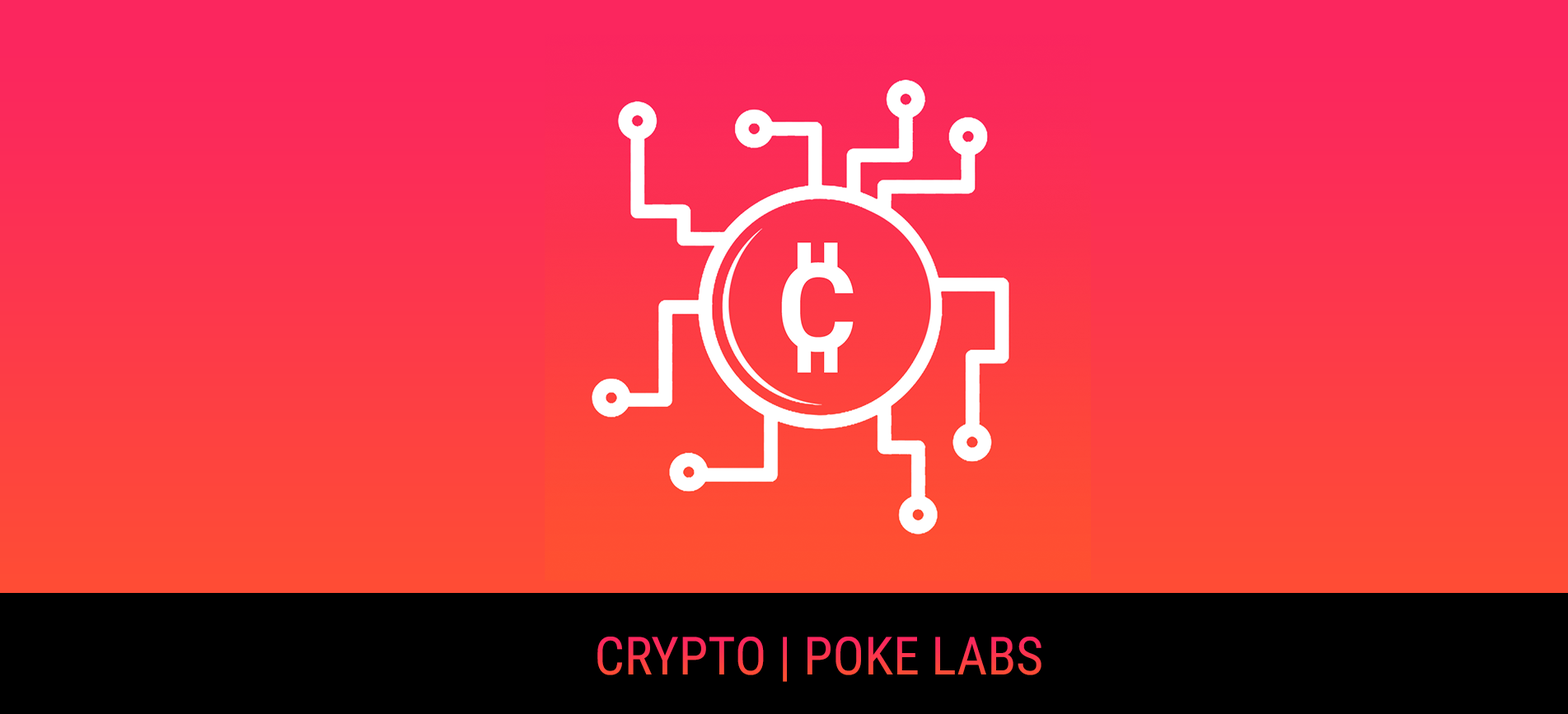
<style>
.page{position:relative;width:1568px;height:714px}
.page>*{position:absolute;margin:0}
.t1{font:52.7px "RobotoCondensed-Regular";color:#fc364d}
</style>
<div class="page">
<p class="t1" style="left:597px;top:637px;width:444px;height:45px">CRYPTO | POKE LABS</p>
</div>
